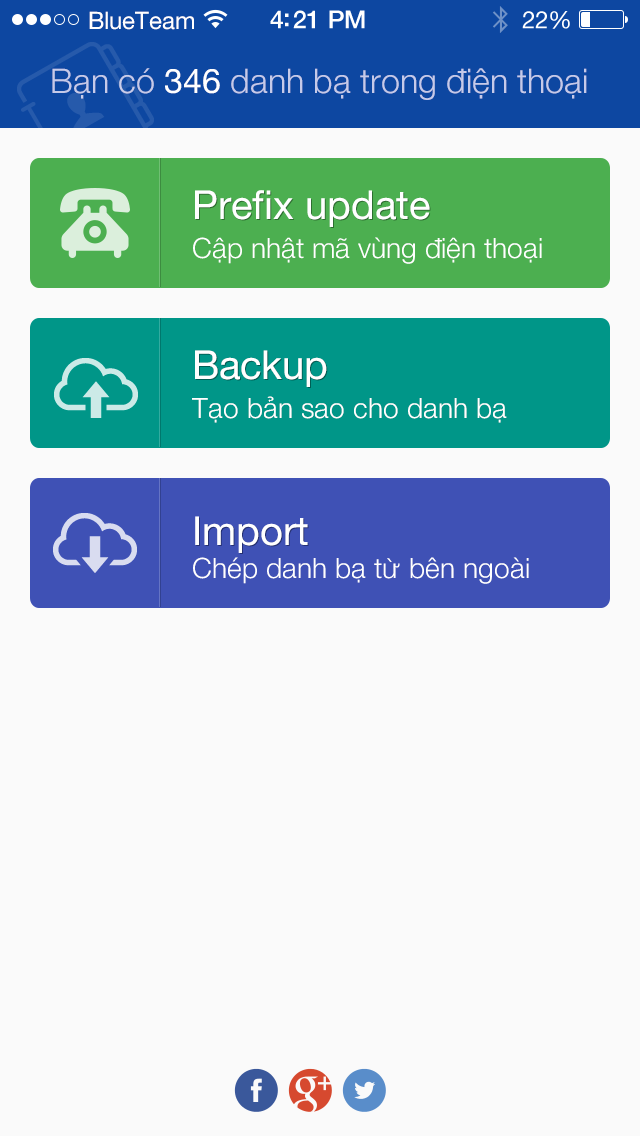
<style>
.page{position:relative;width:640px;height:1136px;background:#fafafa}
.page>*{position:absolute;margin:0}
.t1{font:24px "HelveticaNeue";color:#ffffff}
.t2{font:34px "HelveticaNeue-Light";color:#c5cae9}
.t3{font:34px "HelveticaNeue";color:#ffffff}
.t4{font:40px "HelveticaNeue";color:#ffffff}
.t5{font:40px "HelveticaNeue"}
.t6{font:28px "HelveticaNeue-Light";color:#ffffff}
</style>
<div class="page">
<p class="t1" style="left:89px;top:11px;width:105px;height:19px">BlueTeam</p>
<p class="t2" style="left:52px;top:68px;width:535px;height:32px">Bạn có <span class="t3">346</span> danh bạ trong điện thoại</p>
<p class="t4" style="left:195px;top:190px;width:235px;height:37px">Prefix update</p>
<p class="t5" style="left:196px;top:191px;width:235px;height:37px">Prefix update</p>
<p class="t6" style="left:193px;top:237px;width:349px;height:27px">Cập nhật mã vùng điện thoại</p>
<p class="t4" style="left:195px;top:350px;width:132px;height:37px">Backup</p>
<p class="t5" style="left:196px;top:351px;width:132px;height:37px">Backup</p>
<p class="t6" style="left:192px;top:396px;width:315px;height:27px">Tạo bản sao cho danh bạ</p>
<p class="t4" style="left:195px;top:516px;width:113px;height:37px">Import</p>
<p class="t5" style="left:196px;top:517px;width:113px;height:37px">Import</p>
<p class="t6" style="left:193px;top:557px;width:336px;height:27px">Chép danh bạ từ bên ngoài</p>
</div>
